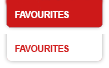
<style>
.page{position:relative;width:109px;height:68px;background:#ffffff}
.page>*{position:absolute;margin:0}
.t1{font:9px "Arial-BoldMT";letter-spacing:-0.025em;color:#ffffff}
.t2{font:9px "Arial-BoldMT";letter-spacing:-0.025em;color:#d31f1f}
</style>
<div class="page">
<p class="t1" style="left:15px;top:11px;width:54px;height:7px">FAVOURITES</p>
<p class="t2" style="left:15px;top:45px;width:54px;height:7px">FAVOURITES</p>
</div>
